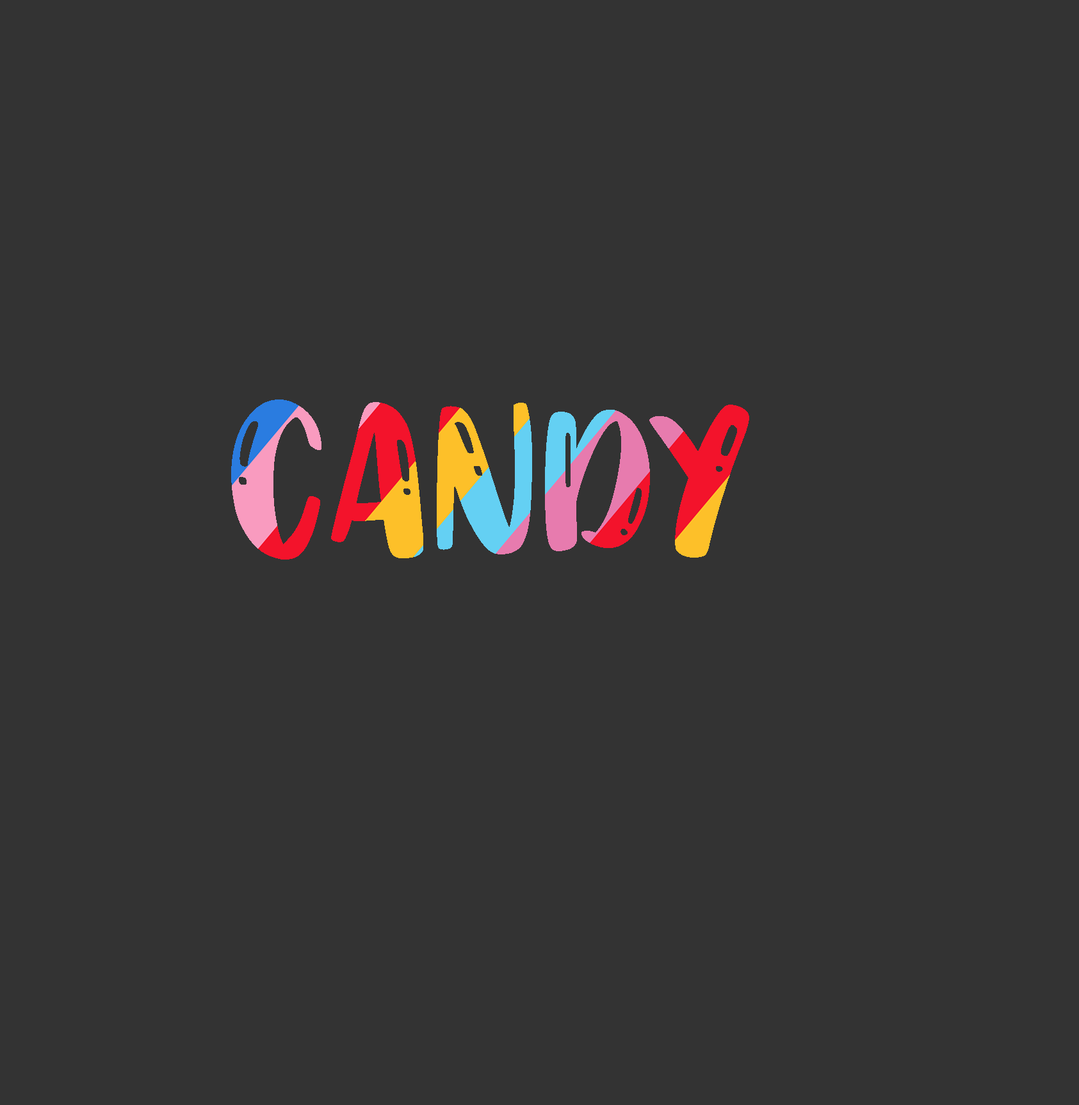
<style>
.page{position:relative;width:1079px;height:1105px;background:#333333}
.page>*{position:absolute;margin:0}
.t1{font:153.7px "Humbleboysdemo"}
</style>
<div class="page">
<p class="t1" style="left:231px;top:400px;width:518px;height:160px">CANDY</p>
</div>
